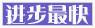
<style>
.page{position:relative;width:95px;height:28px;background:#f9faf3}
.page>*{position:absolute;margin:0}
.t1{font:21px "DFYaSongW9";color:#f9faf3}
</style>
<div class="page">
<p class="t1" style="left:5px;top:4px;width:84px;height:21px">进步最快</p>
</div>
